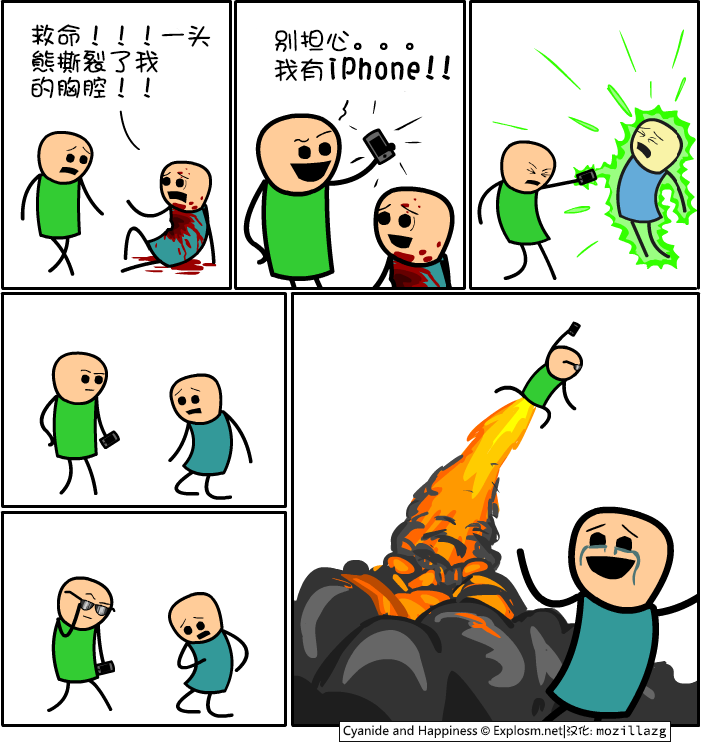
<style>
.page{position:relative;width:701px;height:743px;background:#ffffff}
.page>*{position:absolute;margin:0}
.t1{font:26px/26px "DFShaoNvW5";color:#000000}
.t2{font:30px/26px "DFShaoNvW5";color:#000000;font-weight:bold}
</style>
<div class="page">
<p class="t1" style="left:31px;top:24px;width:180px;height:75px">救命！！！一头<br>熊撕裂了我<br>的胸腔！！</p>
<p class="t1" style="left:274px;top:29px;width:176px;height:53px">别担心。。。<br>  我有<span class="t2">iPhone!!</span></p>
</div>
